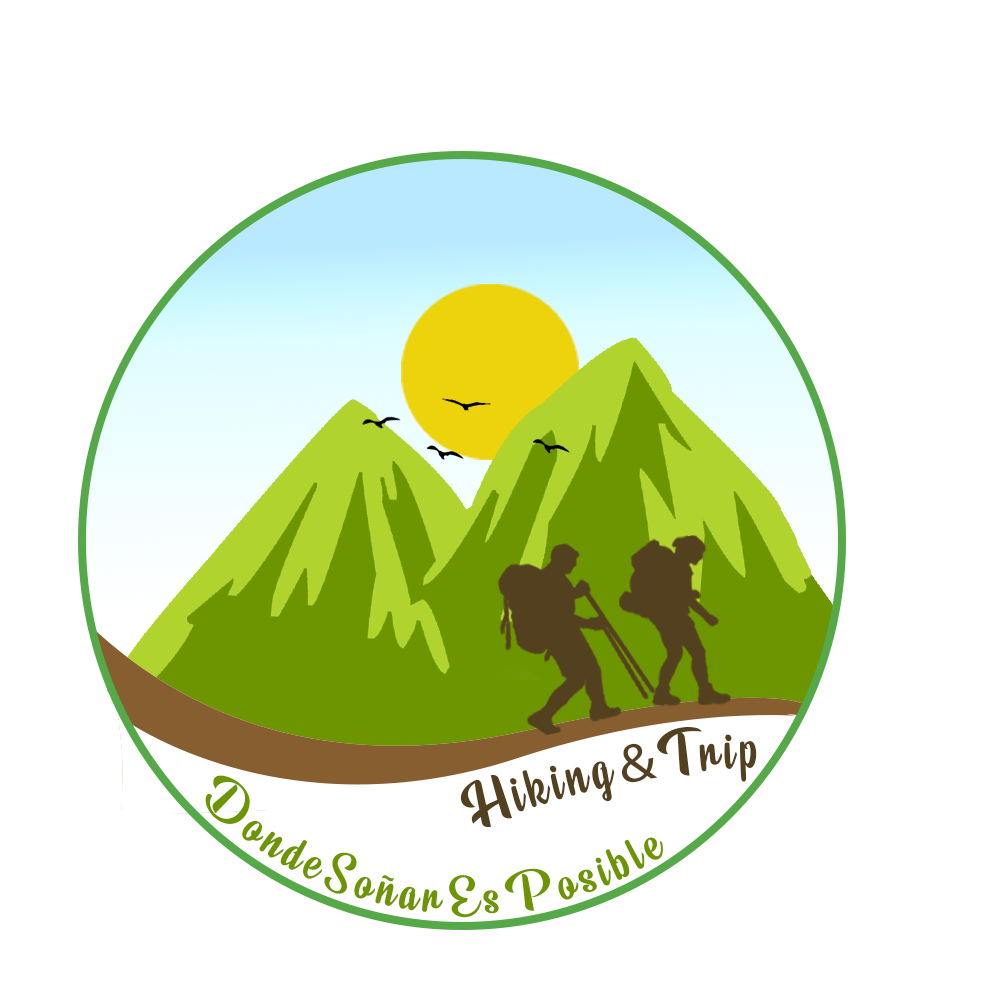
<style>
.page{position:relative;width:1000px;height:1000px;background:#ffffff}
.page>*{position:absolute;margin:0}
.t1{font:54.2px "BeautyMountainsPersonalUse";letter-spacing:0.08em;color:#53401f}
.t2{font:54.2px "MyriadPro-Regular";letter-spacing:0.08em;color:#53401f}
.t3{font:46.4px "BeautyMountainsPersonalUse";letter-spacing:0.08em;color:#6d9500}
</style>
<div class="page">
<p class="t1" style="left:460px;top:727px;width:297px;height:101px;rotate:-9deg">Hiking<span class="t2">&amp;</span>Trip</p>
<p class="t3" style="left:205px;top:775px;width:458px;height:143px;rotate:7deg">DondeSoñarEsPosible</p>
</div>
